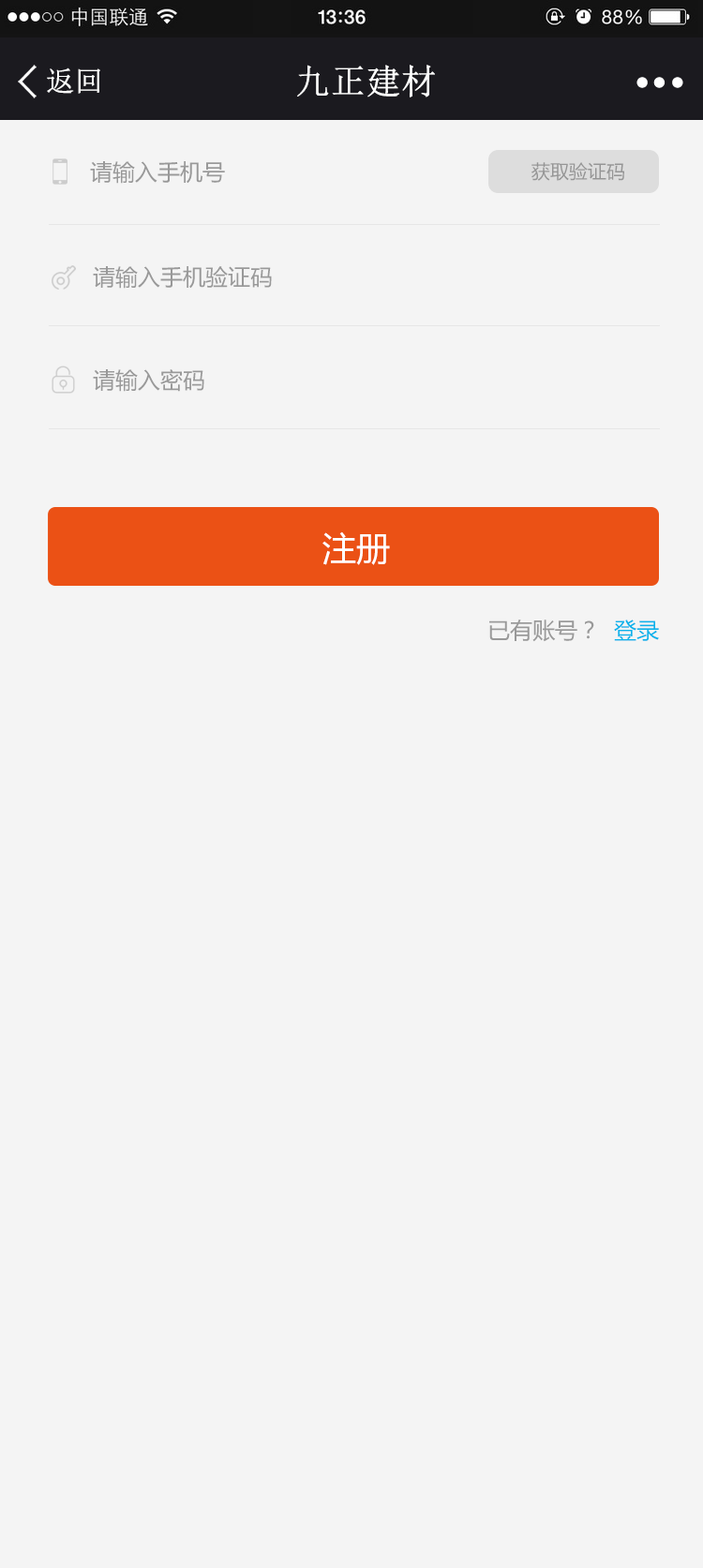
<style>
.page{position:relative;width:703px;height:1568px;background:#f4f4f4}
.page>*{position:absolute;margin:0}
.t1{font:34.4px "NSimSun";color:#ffffff;font-weight:bold}
.t2{font:28.1px "NSimSun";color:#ffffff;font-weight:bold}
.t3{font:22.5px "MicrosoftYaHei";color:#999999}
.t4{font:18.7px "MicrosoftYaHei";color:#959595}
.t5{font:33.7px "MicrosoftYaHei";color:#ffffff}
.t6{font:22.5px "MicrosoftYaHei";color:#0bb3eb}
</style>
<div class="page">
<p class="t1" style="left:297px;top:65px;width:138px;height:32px">九正建材</p>
<p class="t2" style="left:47px;top:67px;width:53px;height:27px">返回</p>
<p class="t3" style="left:90px;top:161px;width:135px;height:23px">请输入手机号</p>
<p class="t4" style="left:531px;top:162px;width:93px;height:19px">获取验证码</p>
<p class="t3" style="left:93px;top:266px;width:179px;height:23px">请输入手机验证码</p>
<p class="t3" style="left:93px;top:369px;width:111px;height:23px">请输入密码</p>
<p class="t5" style="left:322px;top:531px;width:68px;height:34px">注册</p>
<p class="t3" style="left:489px;top:620px;width:105px;height:22px">已有账号？</p>
<p class="t6" style="left:614px;top:620px;width:45px;height:21px">登录</p>
</div>
